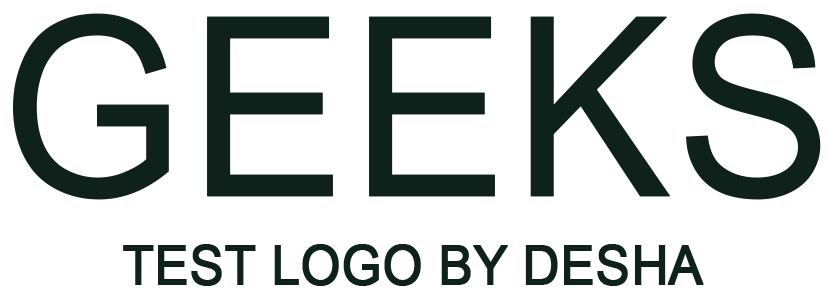
<style>
.page{position:relative;width:838px;height:306px;background:#ffffff}
.page>*{position:absolute;margin:0}
.t1{font:250.4px "ArialMT";color:#0e211b;font-weight:bold;scale:0.93 1}
.t2{font:54.1px "ArialMT";color:#0e211b;font-weight:bold;scale:0.93 1}
</style>
<div class="page">
<p class="t1" style="left:13px;top:13px;width:808px;height:187px">GEEKS</p>
<p class="t2" style="left:123px;top:244px;width:581px;height:42px">TEST LOGO BY DESHA</p>
</div>
